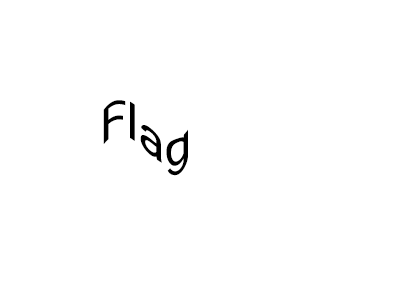
<style>
.page{position:relative;width:400px;height:300px;background:#ffffff}
.page>*{position:absolute;margin:0}
.t1{font:48px "Roboto-Regular";color:#000000}
</style>
<div class="page">
<p class="t1" style="left:103px;top:100px;width:85px;height:76px">Flag</p>
</div>
